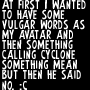
<style>
.page{position:relative;width:90px;height:90px;background:#000000}
.page>*{position:absolute;margin:0}
.t1{font:18px/10px "Earth's-Mightiest";letter-spacing:-0.005em;color:#ffffff}
.t2{font:18px/11px "Earth's-Mightiest";letter-spacing:-0.005em;color:#ffffff}
</style>
<div class="page">
<p class="t1" style="left:2px;top:0px;width:84px;height:90px">At first I wanted to have some vulgar words as my avatar and<br>then something<br>calling cyclone something mean<br>but then he said <br><span class="t2">no. :c</span></p>
</div>
